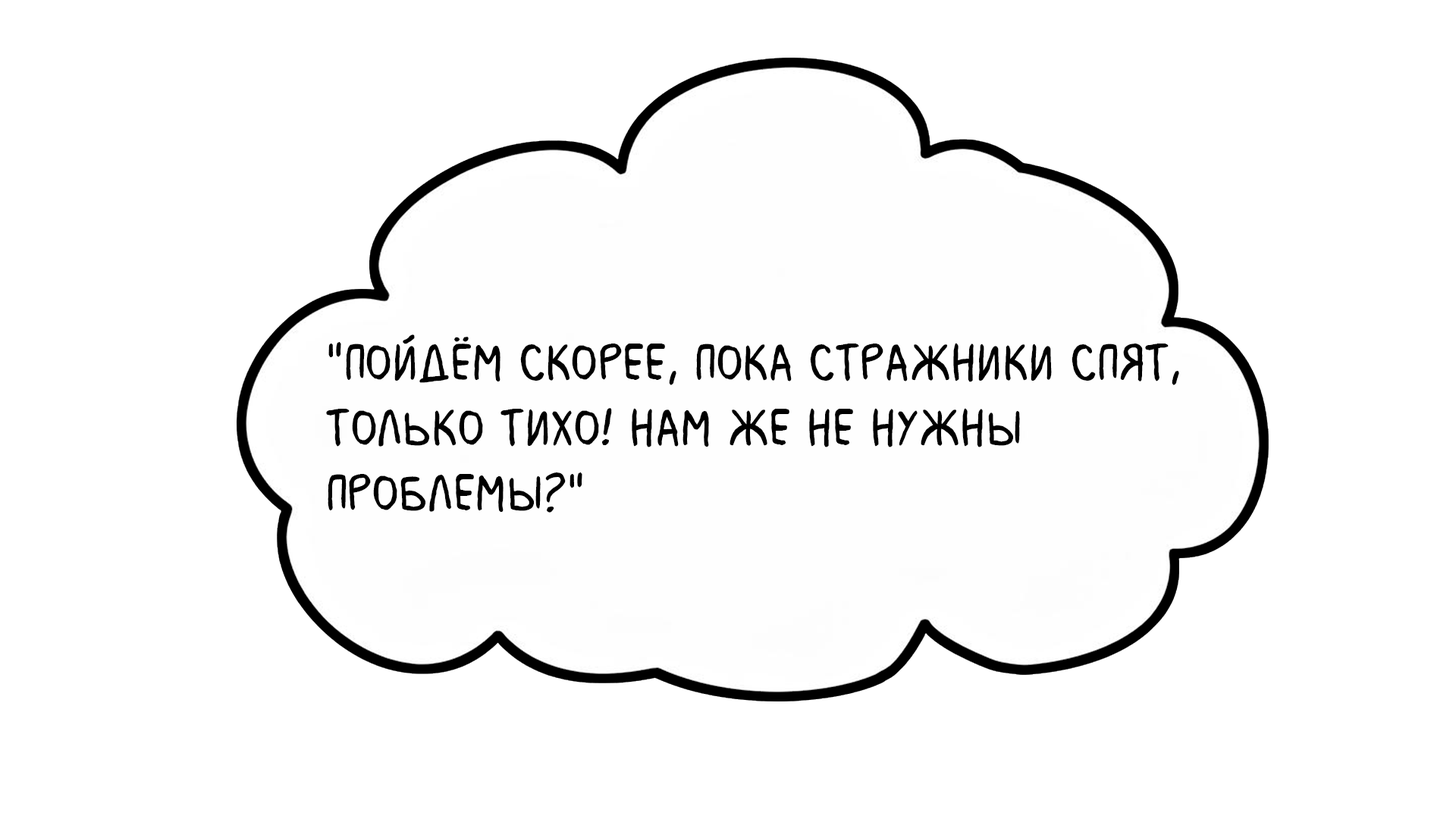
<style>
.page{position:relative;width:1456px;height:819px;background:#ffffff}
.page>*{position:absolute;margin:0}
.t1{font:54.6px "MilkMustacheBB";color:#000000}
</style>
<div class="page">
<p class="t1" style="left:326px;top:334px;width:853px;height:179px">"Пойдём скорее, пока стражники спят, <br>только тихо! Нам же не нужны <br>проблемы?"</p>
</div>
